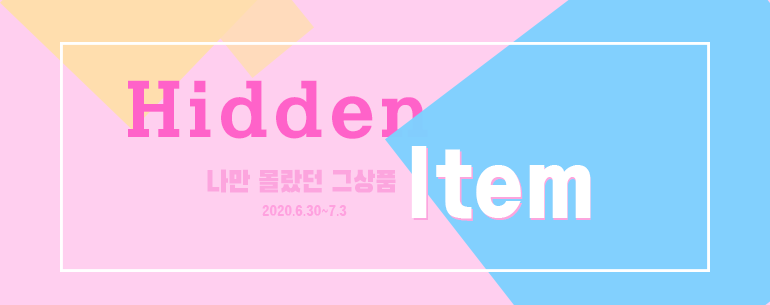
<style>
.page{position:relative;width:770px;height:305px;background:#ffcfef}
.page>*{position:absolute;margin:0}
.t1{font:72px "HaanSomangB";color:#ff62c9}
.t2{font:82.3px "HeadlineR-HM";color:#ffffff;scale:0.86 1}
.t3{font:82.7px "HeadlineR-HM";color:#ffffff;scale:0.85 1}
.t4{font:30px "BlackHanSans";color:#fca5de;scale:0.87 1}
.t5{font:12px "HeadlineR-HM";color:#ffa1df;scale:0.87 1}
.t6{font:18px "HeadlineR-HM";color:#ffa1df;scale:0.87 1}
</style>
<div class="page">
<p class="t1" style="left:128px;top:80px;width:300px;height:59px">Hidden</p>
<p class="t2" style="left:411px;top:146px;width:180px;height:73px">Item</p>
<p class="t3" style="left:413px;top:148px;width:178px;height:73px">Item</p>
<p class="t4" style="left:207px;top:169px;width:189px;height:24px">나만 몰랐던 그상품</p>
<p class="t5" style="left:262px;top:205px;width:85px;height:11px"><span class="t6"> </span>2020.6.30~7.3</p>
</div>
